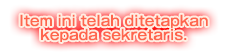
<style>
.page{position:relative;width:228px;height:55px;background:#ffffff}
.page>*{position:absolute;margin:0}
.t1{font:14px/14px "GothicMB101Pro-Medium";color:#ff664d}
</style>
<div class="page">
<p class="t1" style="left:20px;top:14px;width:188px;height:28px;text-align:center">Item ini telah ditetapkan<br>kepada sekretaris.</p>
</div>
